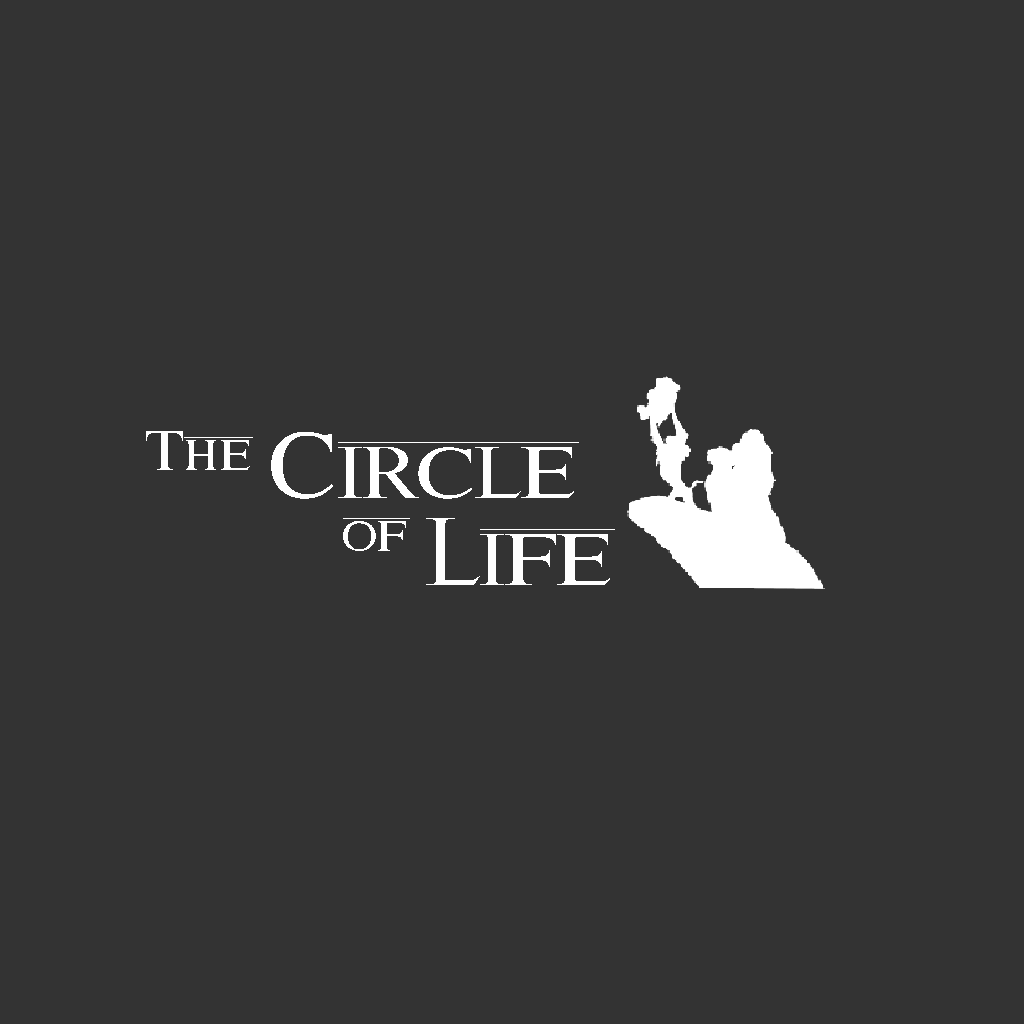
<style>
.page{position:relative;width:1024px;height:1024px;background:#333333}
.page>*{position:absolute;margin:0}
.t1{font:56px "Lion-kinG";color:#ffffff}
.t2{font:94.9px "Lion-kinG";color:#ffffff}
</style>
<div class="page">
<p class="t1" style="left:146px;top:431px;width:107px;height:39px">The</p>
<p class="t2" style="left:271px;top:432px;width:308px;height:67px">Circle</p>
<p class="t1" style="left:343px;top:518px;width:67px;height:33px">of</p>
<p class="t2" style="left:426px;top:518px;width:189px;height:67px">Life</p>
</div>
